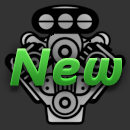
<style>
.page{position:relative;width:130px;height:130px;background:#333333}
.page>*{position:absolute;margin:0}
.t1{font:50.5px "Sansation-Bold-Italic";letter-spacing:0.05em;font-weight:bold}
</style>
<div class="page">
<p class="t1" style="left:10px;top:48px;width:112px;height:38px">New</p>
</div>
